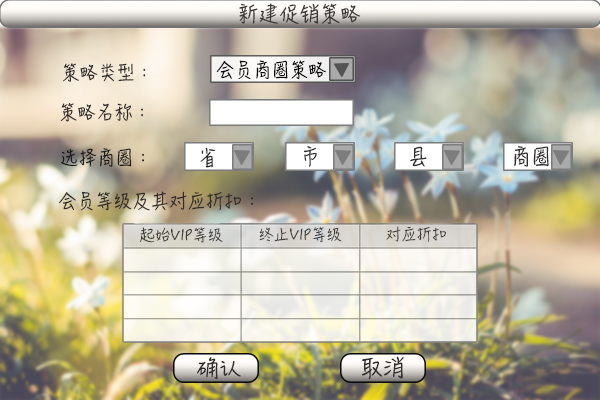
<style>
.page{position:relative;width:600px;height:400px}
.page>*{position:absolute;margin:0}
.t1{font:20px "HanziPenSC-W5";letter-spacing:-0.005em;color:#3e3939;text-transform:uppercase}
.t2{font:18px "HanziPenSC-W5";letter-spacing:-0.005em;color:#302c2c;text-transform:uppercase}
.t3{font:18px "HanziPenSC-W5";letter-spacing:-0.005em;color:#050505;text-transform:uppercase}
.t4{font:18px "HanziPenSC-W5";letter-spacing:-0.005em;color:#1a1919;text-transform:uppercase}
</style>
<div class="page">
<p class="t1" style="left:239px;top:3px;width:122px;height:22px">新建促销策略</p>
<p class="t2" style="left:63px;top:63px;width:83px;height:19px">策略类型：</p>
<p class="t3" style="left:216px;top:60px;width:110px;height:20px">会员商圈策略</p>
<p class="t2" style="left:60px;top:103px;width:83px;height:19px">策略名称：</p>
<p class="t4" style="left:61px;top:148px;width:83px;height:19px">选择商圈：</p>
<p class="t2" style="left:59px;top:191px;width:194px;height:20px">会员等级及其对应折扣：</p>
</div>
